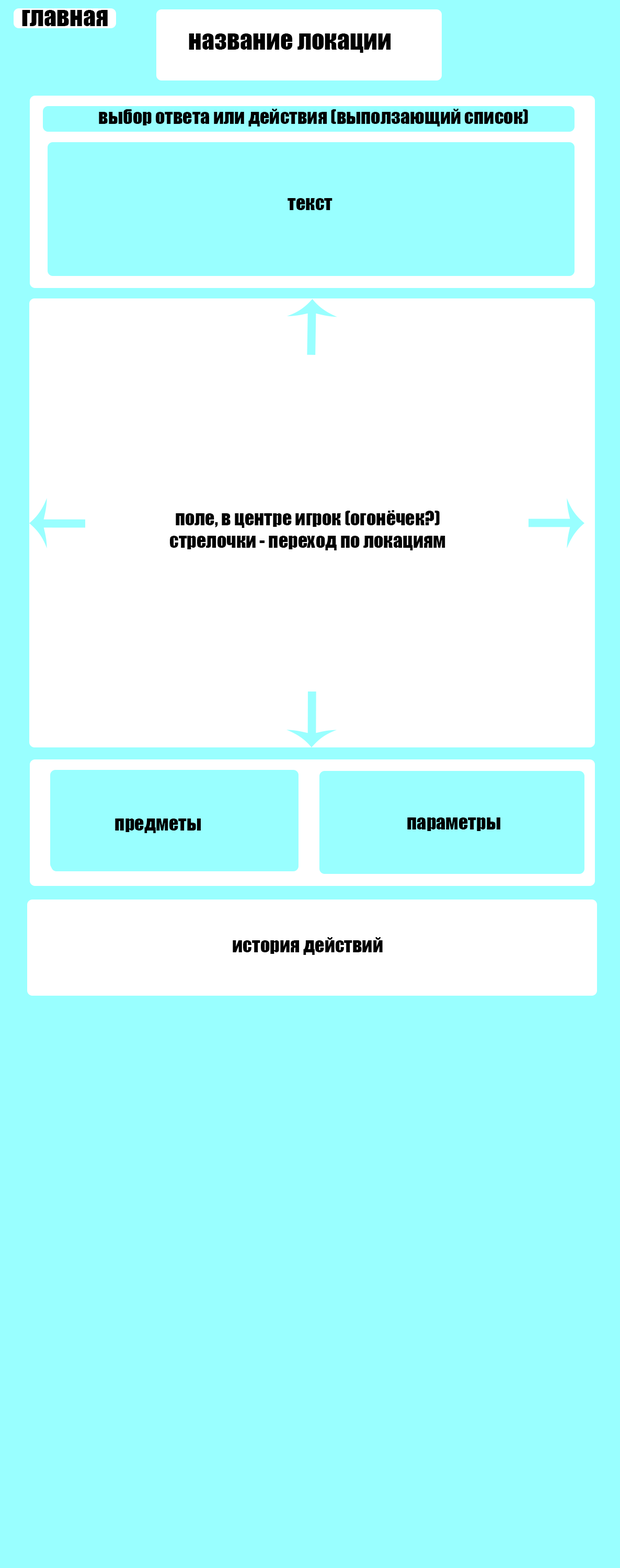
<style>
.page{position:relative;width:620px;height:1568px;background:#99ffff}
.page>*{position:absolute;margin:0}
.t1{font:25.1px "Impact";color:#000000}
.t2{font:18.8px "Impact";color:#000000}
</style>
<div class="page">
<p class="t1" style="left:22px;top:10px;width:86px;height:16px">главная</p>
<p class="t1" style="left:189px;top:33px;width:202px;height:20px">название локации</p>
<p class="t2" style="left:99px;top:109px;width:429px;height:17px">выбор ответа или действия (выползающий список)</p>
<p class="t2" style="left:287px;top:198px;width:45px;height:12px">текст</p>
<p class="t2" style="left:170px;top:510px;width:275px;height:40px;text-align:center">поле, в центре игрок (огонёчек?)<br>стрелочки - переход по локациям</p>
<p class="t2" style="left:115px;top:818px;width:86px;height:15px">предметы</p>
<p class="t2" style="left:407px;top:817px;width:93px;height:14px">параметры</p>
<p class="t2" style="left:233px;top:937px;width:150px;height:18px">история действий</p>
</div>
